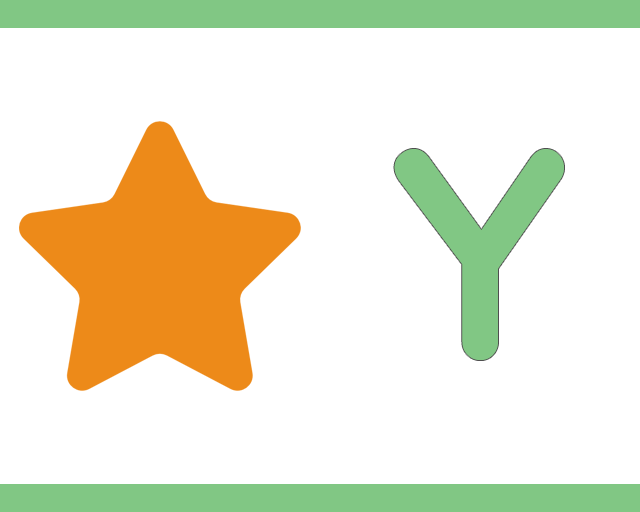
<style>
.page{position:relative;width:640px;height:512px;background:#ffffff}
.page>*{position:absolute;margin:0}
.t1{font:300px "Quicksand-Bold";color:#81c784}
</style>
<div class="page">
<p class="t1" style="left:394px;top:149px;width:170px;height:211px">Y</p>
</div>
